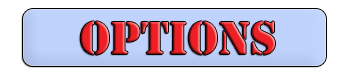
<style>
.page{position:relative;width:350px;height:75px;background:#ffffff}
.page>*{position:absolute;margin:0}
.t1{font:48px "Stencil"}
</style>
<div class="page">
<p class="t1" style="left:80px;top:21px;width:195px;height:34px">Options</p>
</div>
